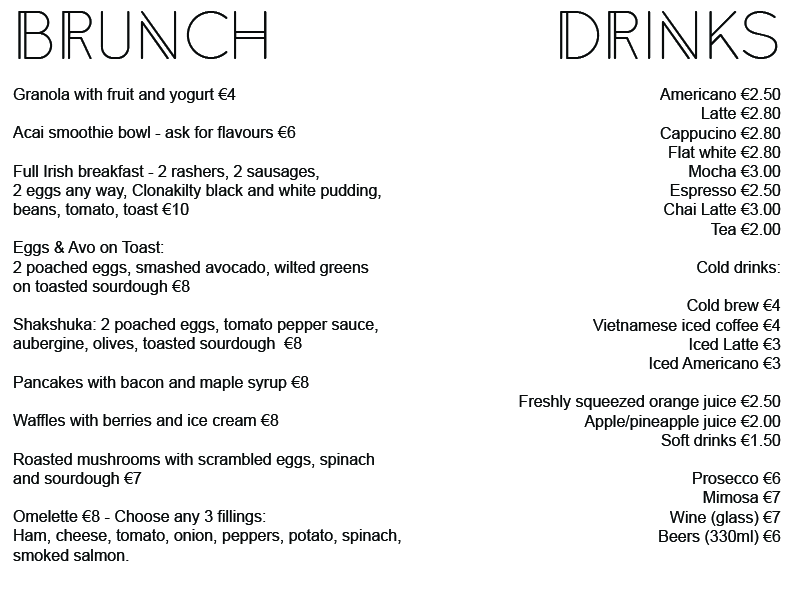
<style>
.page{position:relative;width:800px;height:600px;background:#ffffff}
.page>*{position:absolute;margin:0}
.t1{font:16px "ArialMT";color:#070a0a}
.t2{font:60px "Anders";color:#070a0a}
.t3{font:16px "Anders";color:#070a0a}
</style>
<div class="page">
<p class="t1" style="left:13px;top:11px;width:388px;height:550px"><span class="t2">Brunch<br><br></span>Granola with fruit and yogurt €4<br><br>Acai smoothie bowl - ask for flavours €6<br><br>Full Irish breakfast - 2 rashers, 2 sausages, <br>2 eggs any way, Clonakilty black and white pudding, <br>beans, tomato, toast €10<br><br>Eggs &amp; Avo on Toast:<br>2 poached eggs, smashed avocado, wilted greens <br>on toasted sourdough €8<br><br>Shakshuka: 2 poached eggs, tomato pepper sauce, <br>aubergine, olives, toasted sourdough  €8<br><br>Pancakes with bacon and maple syrup €8<br><br>Waffles with berries and ice cream €8<br><br>Roasted mushrooms with scrambled eggs, spinach<br>and sourdough €7<br><br>Omelette €8 - Choose any 3 fillings:<br>Ham, cheese, tomato, onion, peppers, potato, spinach,<br>smoked salmon.</p>
<p class="t1" style="left:519px;top:11px;width:262px;height:534px"><span class="t3"><br><br><br></span><span class="t2">DRINKS<br><br></span>Americano €2.50<br>Latte €2.80<br>Cappucino €2.80<br>Flat white €2.80<br>Mocha €3.00<br>Espresso €2.50<br>Chai Latte €3.00<br>Tea €2.00<br><br>Cold drinks:<br><br>Cold brew €4<br>Vietnamese iced coffee €4<br>Iced Latte €3<br>Iced Americano €3<br><br>Freshly squeezed orange juice €2.50<br>Apple/pineapple juice €2.00<br>Soft drinks €1.50<br><br>Prosecco €6<br>Mimosa €7<br>Wine (glass) €7<br>Beers (330ml) €6</p>
</div>
